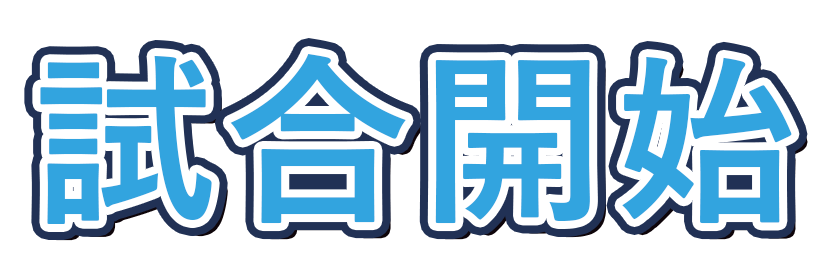
<style>
.page{position:relative;width:830px;height:278px;background:#ffffff}
.page>*{position:absolute;margin:0}
.t1{font:183.3px "YuGothic-Bold";letter-spacing:0.06em;color:#32a4df}
</style>
<div class="page">
<p class="t1" style="left:40px;top:54px;width:752px;height:170px">試合開始</p>
</div>
